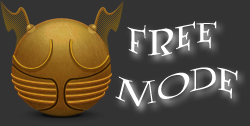
<style>
.page{position:relative;width:250px;height:126px;background:#333333}
.page>*{position:absolute;margin:0}
.t1{font:36px "Lumos";color:#ffffff;text-transform:uppercase}
</style>
<div class="page">
<p class="t1" style="left:127px;top:21px;width:90px;height:36px">Free</p>
<p class="t1" style="left:115px;top:67px;width:123px;height:40px">Mode</p>
</div>
